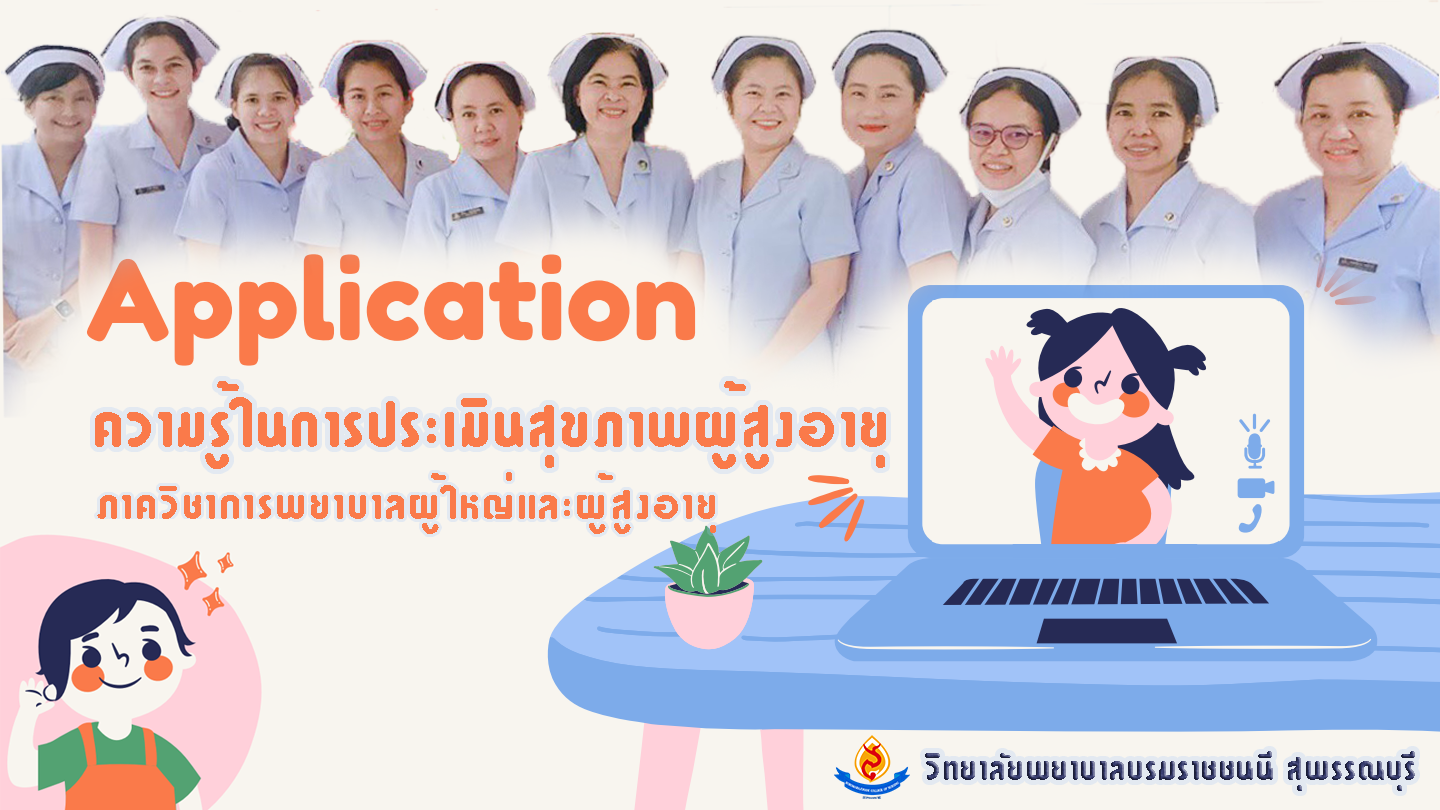
<style>
.page{position:relative;width:1440px;height:810px;background:#f8f5ef}
.page>*{position:absolute;margin:0}
.t1{font:86.7px "DSNSuKumWit";letter-spacing:0.01em;color:#fa7a4a;text-transform:uppercase}
.t2{font:60px "DSNSuKumWit";letter-spacing:0.025em;color:#fa7a4a;text-transform:uppercase}
.t3{font:48px "DSNSuKumWit";letter-spacing:0.01em;text-transform:uppercase}
</style>
<div class="page">
<p class="t1" style="left:95px;top:381px;width:791px;height:88px">ความรู้ในการประเมินสุขภาพผู้สูงอายุ</p>
<p class="t2" style="left:97px;top:472px;width:619px;height:62px">ภาควิชาการพยาบาลผู้ใหญ่และผู้สูงอายุ</p>
<p class="t3" style="left:925px;top:751px;width:490px;height:40px">วิทยาลัยพยาบาลบรมราชชนนี สุพรรณบุรี</p>
</div>
